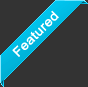
<style>
.page{position:relative;width:88px;height:87px;background:#333333}
.page>*{position:absolute;margin:0}
.t1{font:12.6px "ArialMT";color:#ffffff;font-weight:bold;scale:1.1 1}
</style>
<div class="page">
<p class="t1" style="left:12px;top:10px;width:47px;height:47px;rotate:-45deg">Featured</p>
</div>
